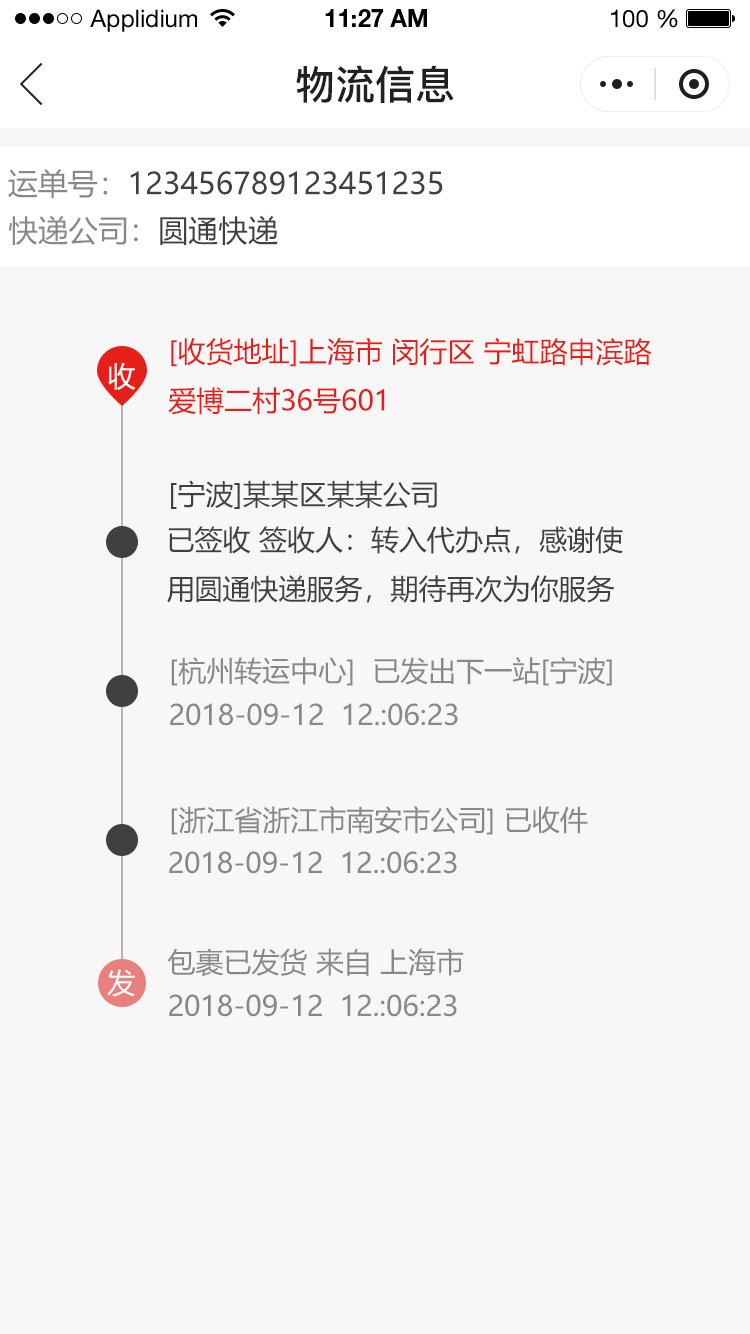
<style>
.page{position:relative;width:750px;height:1334px;background:#f7f7f7}
.page>*{position:absolute;margin:0}
.t1{font:24px "HelveticaNeueLTStd-Roman";color:#000000}
.t2{font:24px "HelveticaNeueLTStd-Bd";color:#000000}
.t3{font:40px "PingFang-SC-Bold";color:#202020;text-transform:uppercase}
.t4{font:30px "MicrosoftYaHei";color:#404040;text-transform:uppercase}
.t5{font:30px "MicrosoftYaHei";color:#888888;text-transform:uppercase}
.t6{font:28px "MicrosoftYaHei";color:#e61f18;text-transform:uppercase}
.t7{font:28px "MicrosoftYaHei";color:#ffffff;text-transform:uppercase}
.t8{font:28px "MicrosoftYaHei";color:#404040;text-transform:uppercase}
.t9{font:28px "MicrosoftYaHei";color:#888888;text-transform:uppercase}
</style>
<div class="page">
<p class="t1" style="left:90px;top:9px;width:107px;height:23px">Applidium</p>
<p class="t2" style="left:325px;top:9px;width:102px;height:18px">11:27 AM</p>
<p class="t1" style="left:611px;top:9px;width:67px;height:19px">100 %</p>
<p class="t3" style="left:296px;top:65px;width:158px;height:38px">物流信息</p>
<p class="t4" style="left:8px;top:169px;width:435px;height:30px"><span class="t5">运单号：</span>123456789123451235</p>
<p class="t5" style="left:8px;top:215px;width:270px;height:30px">快递公司：<span class="t4">圆通快递</span></p>
<p class="t6" style="left:168px;top:337px;width:484px;height:78px">[收货地址]上海市 闵行区 宁虹路申滨路<br>爱博二村36号601</p>
<p class="t7" style="left:108px;top:362px;width:28px;height:28px">收</p>
<p class="t8" style="left:171px;top:480px;width:266px;height:29px">[宁波]某某区某某公司</p>
<p class="t8" style="left:167px;top:526px;width:456px;height:77px">已签收 签收人：转入代办点，感谢使<br>用圆通快递服务，期待再次为你服务</p>
<p class="t9" style="left:171px;top:657px;width:441px;height:29px">[杭州转运中心]  已发出下一站[宁波]</p>
<p class="t9" style="left:170px;top:703px;width:288px;height:23px">2018-09-12  12.:06:23</p>
<p class="t9" style="left:171px;top:806px;width:417px;height:29px">[浙江省浙江市南安市公司] 已收件</p>
<p class="t9" style="left:169px;top:851px;width:288px;height:23px">2018-09-12  12.:06:23</p>
<p class="t9" style="left:167px;top:948px;width:297px;height:29px">包裹已发货 来自 上海市</p>
<p class="t7" style="left:107px;top:969px;width:28px;height:28px">发</p>
<p class="t9" style="left:169px;top:994px;width:288px;height:23px">2018-09-12  12.:06:23</p>
</div>
